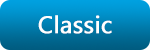
<style>
.page{position:relative;width:150px;height:50px}
.page>*{position:absolute;margin:0}
.t1{font:24px "Gadugi";color:#ffffff;font-weight:bold}
</style>
<div class="page">
<p class="t1" style="left:38px;top:15px;width:74px;height:19px">Classic</p>
</div>
